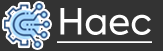
<style>
.page{position:relative;width:163px;height:51px;background:#333333}
.page>*{position:absolute;margin:0}
.t1{font:36px "Axiforma-Regular";color:#fefefe;text-decoration:underline}
</style>
<div class="page">
<p class="t1" style="left:57px;top:8px;width:95px;height:35px">Haec</p>
</div>
